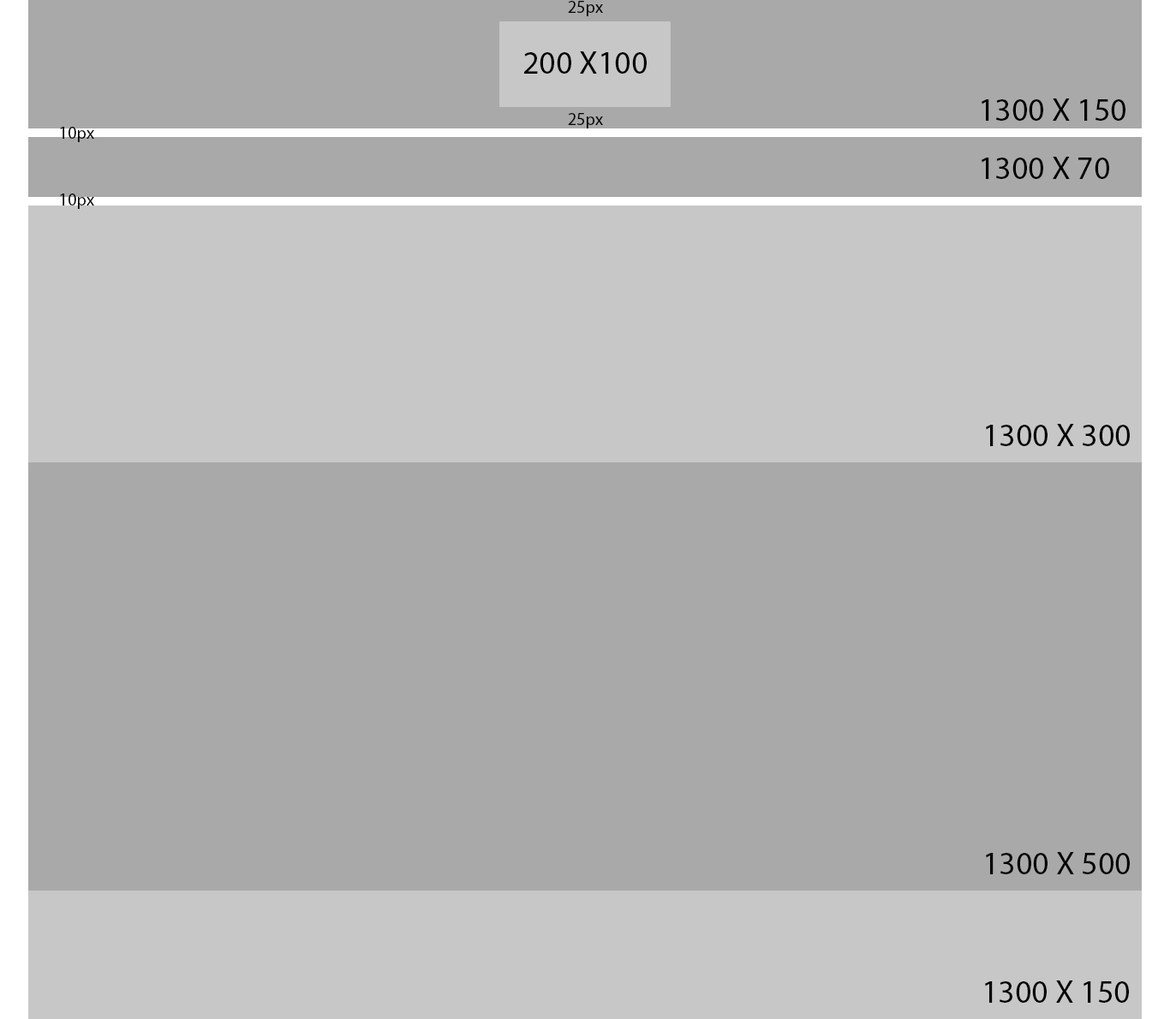
<style>
.page{position:relative;width:1170px;height:1019px;background:#a9a9a9}
.page>*{position:absolute;margin:0}
.t1{font:17.4px "MyriadPro-Regular";color:#000000}
.t2{font:32.5px "MyriadPro-Regular";color:#000000}
</style>
<div class="page">
<p class="t1" style="left:568px;top:1px;width:35px;height:15px">25px</p>
<p class="t2" style="left:524px;top:51px;width:123px;height:23px">200 X100</p>
<p class="t2" style="left:982px;top:98px;width:143px;height:23px">1300 X 150</p>
<p class="t1" style="left:568px;top:113px;width:35px;height:15px">25px</p>
<p class="t1" style="left:60px;top:127px;width:34px;height:15px">10px</p>
<p class="t2" style="left:982px;top:157px;width:127px;height:22px">1300 X 70</p>
<p class="t1" style="left:60px;top:194px;width:34px;height:15px">10px</p>
<p class="t2" style="left:986px;top:424px;width:144px;height:22px">1300 X 300</p>
<p class="t2" style="left:986px;top:852px;width:144px;height:22px">1300 X 500</p>
<p class="t2" style="left:985px;top:981px;width:144px;height:22px">1300 X 150</p>
</div>
